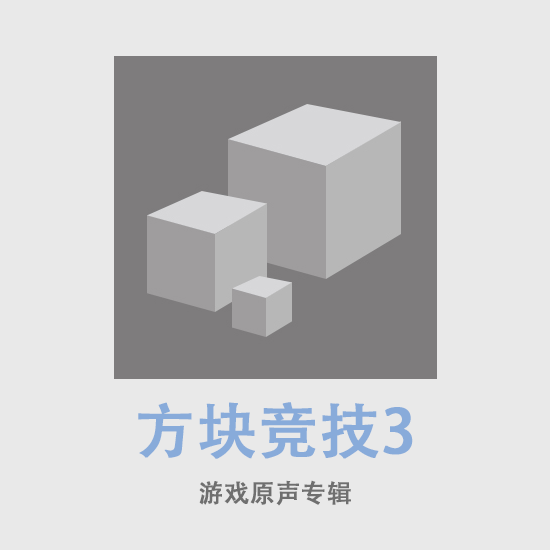
<style>
.page{position:relative;width:550px;height:550px;background:#e9e9e9}
.page>*{position:absolute;margin:0}
.t1{font:25px/80px "AdobeHeitiStd-Regular";color:#6f6f6f;font-weight:bold}
.t2{font:60px/80px "AdobeHeitiStd-Regular";color:#88abda;font-weight:bold}
</style>
<div class="page">
<p class="t1" style="left:138px;top:402px;width:275px;height:104px;text-align:center"><span class="t2">方块竞技3<br></span>游戏原声专辑</p>
</div>
